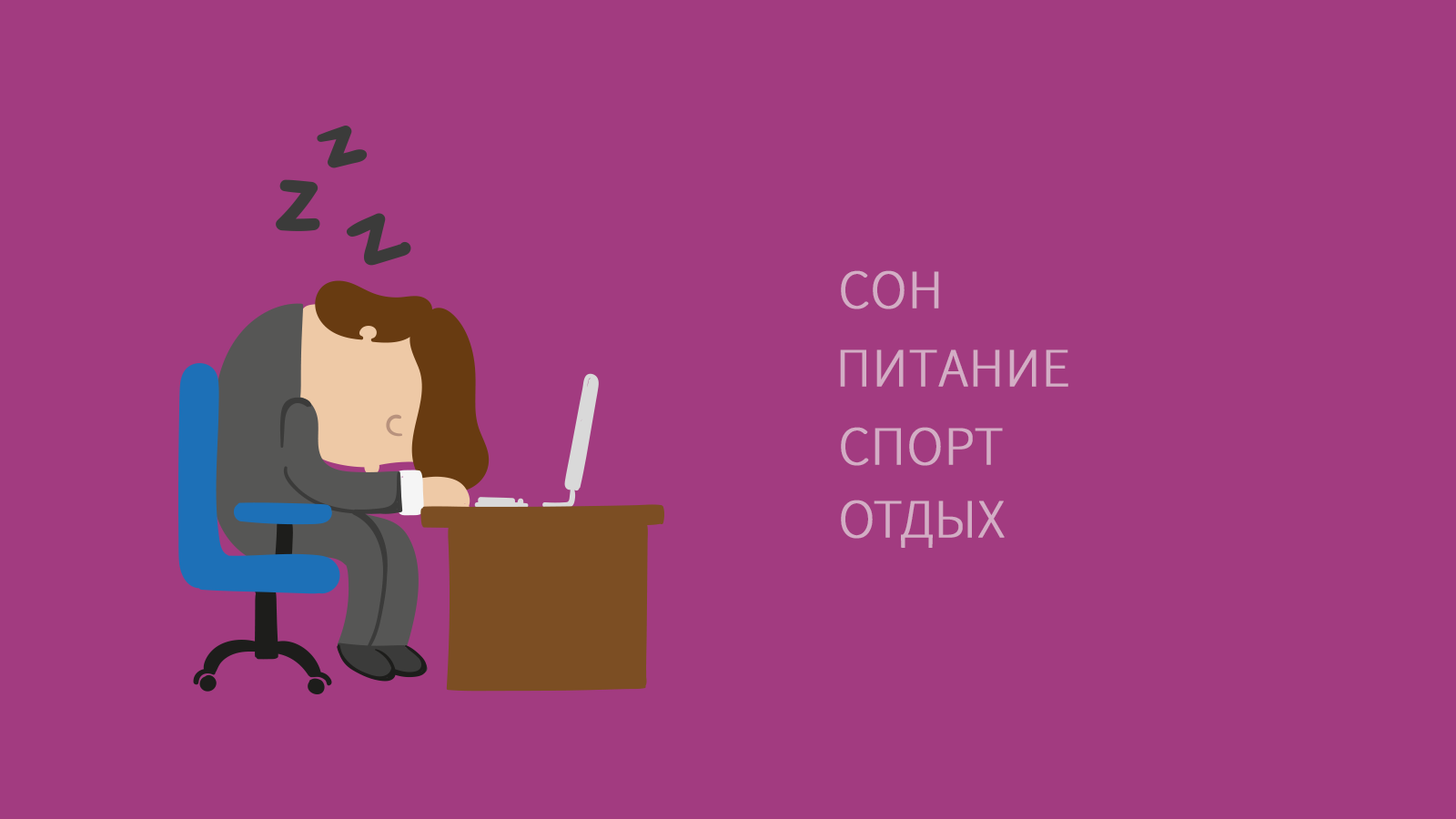
<style>
.page{position:relative;width:1456px;height:819px;background:#a23b80}
.page>*{position:absolute;margin:0}
.t1{font:54.6px "SourceSansPro-Light";color:#d3adc5;text-transform:uppercase;font-weight:bold}
</style>
<div class="page">
<p class="t1" style="left:841px;top:270px;width:98px;height:39px">сон</p>
<p class="t1" style="left:840px;top:349px;width:228px;height:38px">питание</p>
<p class="t1" style="left:841px;top:427px;width:162px;height:39px">спорт</p>
<p class="t1" style="left:841px;top:500px;width:164px;height:48px">отдых</p>
</div>
